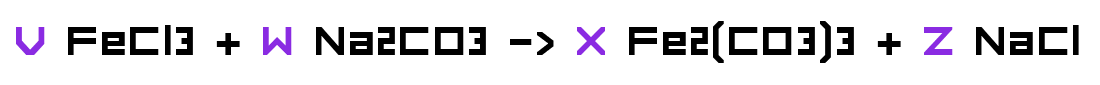
<style>
.page{position:relative;width:1100px;height:85px;background:#ffffff}
.page>*{position:absolute;margin:0}
.t1{font:54px "FORCED-SQUARE";color:#000000}
.t2{font:54px "FORCED-SQUARE";color:#8a2be2}
</style>
<div class="page">
<p class="t1" style="left:16px;top:21px;width:1063px;height:42px"><span class="t2">V</span> FeCl3 + <span class="t2">W </span>Na2CO3 -&gt; <span class="t2">X</span> Fe2(CO3)3 + <span class="t2">Z </span>NaCl</p>
</div>
